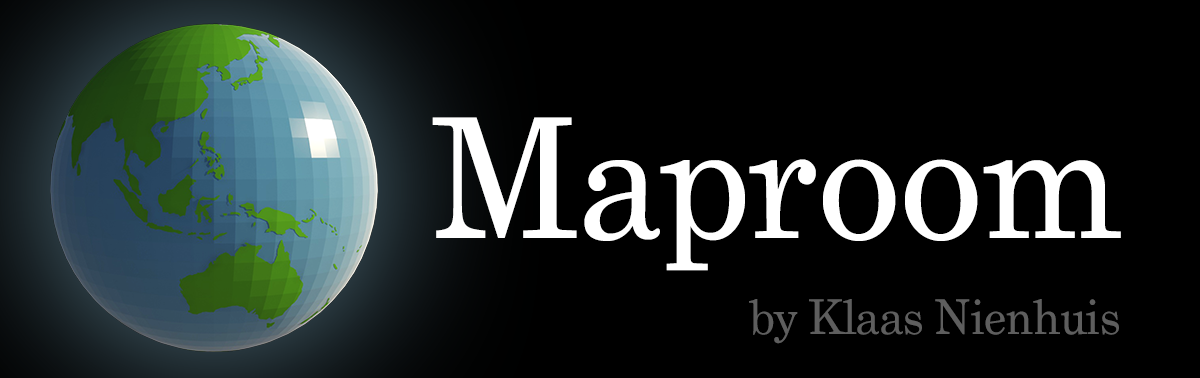
<style>
.page{position:relative;width:1200px;height:378px;background:#000000}
.page>*{position:absolute;margin:0}
.t1{font:166.8px "Grad";color:#ffffff}
.t2{font:48px "Grad";color:#5f5f5f}
</style>
<div class="page">
<p class="t1" style="left:432px;top:117px;width:689px;height:154px">Maproom</p>
<p class="t2" style="left:749px;top:299px;width:370px;height:45px">by Klaas Nienhuis</p>
</div>
